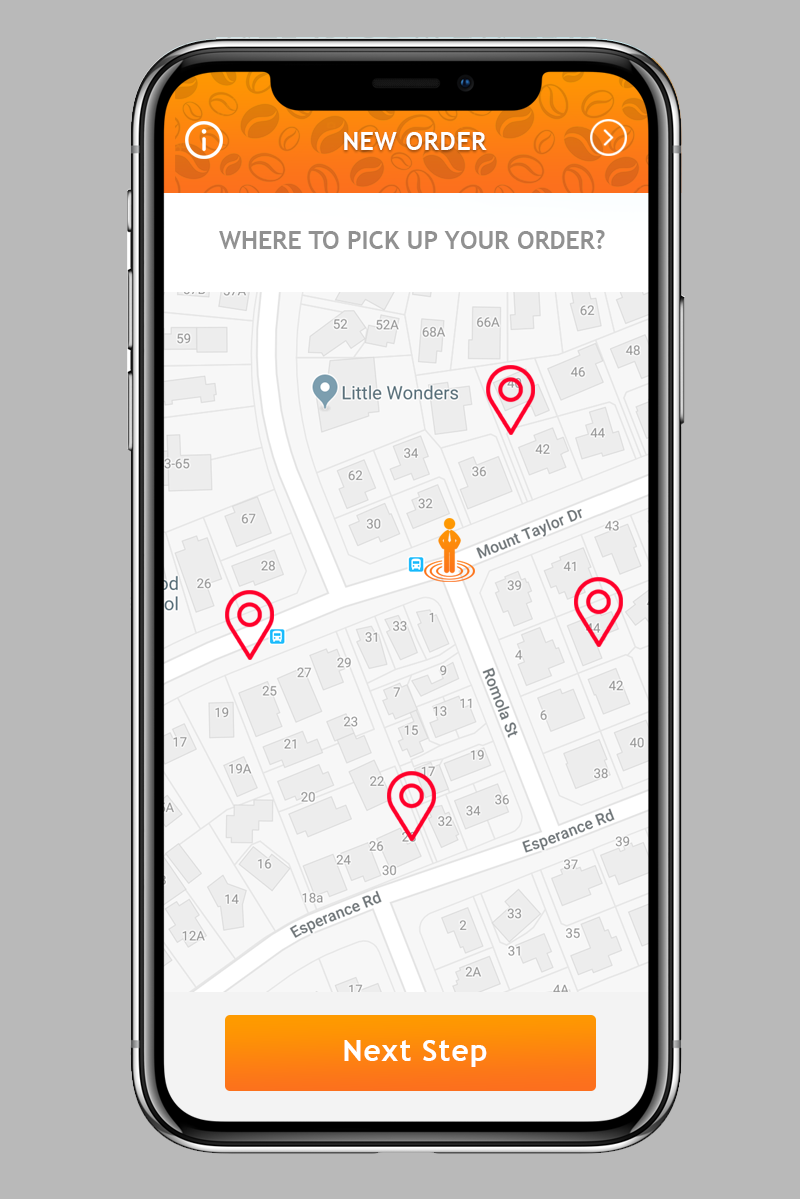
<style>
.page{position:relative;width:800px;height:1200px;background:#b9b9b9}
.page>*{position:absolute;margin:0}
.t1{font:24.8px "TrebuchetMS-Bold";letter-spacing:0.03em;color:#ffffff;text-transform:uppercase}
.t2{font:24.8px "TrebuchetMS-Bold";color:#919191;text-transform:uppercase}
.t3{font:30.3px "TrebuchetMS-Bold";letter-spacing:0.03em;color:#ffffff}
</style>
<div class="page">
<p class="t1" style="left:344px;top:132px;width:143px;height:18px">new order</p>
<p class="t2" style="left:219px;top:230px;width:386px;height:19px">where to pick up your order?</p>
<p class="t3" style="left:344px;top:1040px;width:143px;height:27px">Next Step</p>
</div>
